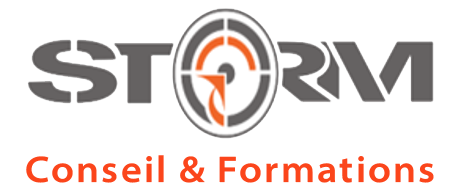
<style>
.page{position:relative;width:461px;height:194px;background:#ffffff}
.page>*{position:absolute;margin:0}
.t1{font:37.2px "MyriadConceptRoman-SemiboldSemiExtended";letter-spacing:0.06em;color:#fb451b}
</style>
<div class="page">
<p class="t1" style="left:26px;top:155px;width:408px;height:28px">Conseil &amp; Formations</p>
</div>
